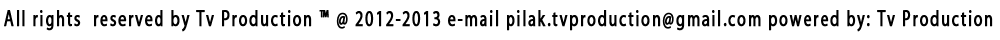
<style>
.page{position:relative;width:1000px;height:40px;background:#ffffff}
.page>*{position:absolute;margin:0}
.t1{font:22.5px "MyriadPro-Regular";letter-spacing:0.1em;color:#000000;font-weight:bold;scale:0.7 1}
</style>
<div class="page">
<p class="t1" style="left:4px;top:10px;width:989px;height:22px">All rights  reserved by Tv Production ™ @ 2012-2013 e-mail pilak.tvproduction@gmail.com powered by: Tv Production</p>
</div>
